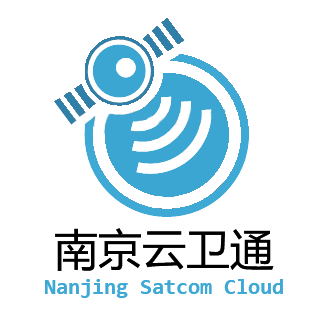
<style>
.page{position:relative;width:310px;height:310px;background:#ffffff}
.page>*{position:absolute;margin:0}
.t1{font:44px "MicrosoftYaHei";color:#000000}
.t2{font:22px "Consolas-Bold";color:#3fa9d5}
</style>
<div class="page">
<p class="t1" style="left:55px;top:228px;width:219px;height:43px">南京云卫通</p>
<p class="t2" style="left:45px;top:279px;width:238px;height:19px">Nanjing Satcom Cloud</p>
</div>
